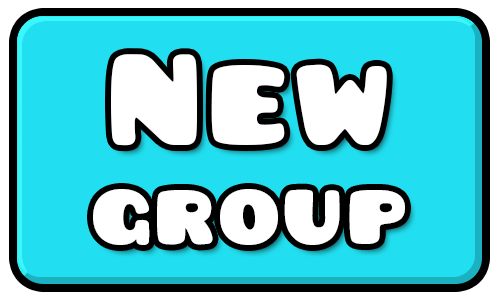
<style>
.page{position:relative;width:500px;height:300px;background:#21dff0}
.page>*{position:absolute;margin:0}
.t1{font:96px/100px "Pusab";letter-spacing:0.04em;color:#ffffff}
.t2{font:140px/100px "Pusab";letter-spacing:0.04em;color:#ffffff}
</style>
<div class="page">
<p class="t1" style="left:93px;top:54px;width:312px;height:191px;text-align:center"><span class="t2">New<br></span>group</p>
</div>
